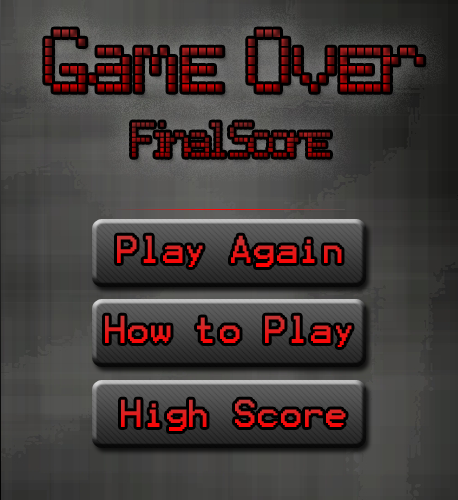
<style>
.page{position:relative;width:458px;height:500px}
.page>*{position:absolute;margin:0}
.t1{font:83px "TexasLED";letter-spacing:-0.02em}
.t2{font:45.7px "TexasLED";letter-spacing:-0.12em}
.t3{font:31.3px "Terminal";letter-spacing:-0.02em;color:#e71717}
.t4{font:31.3px "Terminal";letter-spacing:-0.02em;color:#e41919}
</style>
<div class="page">
<p class="t1" style="left:45px;top:29px;width:379px;height:63px">Game Over</p>
<p class="t2" style="left:132px;top:122px;width:198px;height:35px">Final Score</p>
<p class="t3" style="left:117px;top:235px;width:225px;height:32px">Play Again</p>
<p class="t4" style="left:105px;top:315px;width:247px;height:32px">How to Play</p>
<p class="t4" style="left:121px;top:399px;width:225px;height:32px">High Score</p>
</div>
